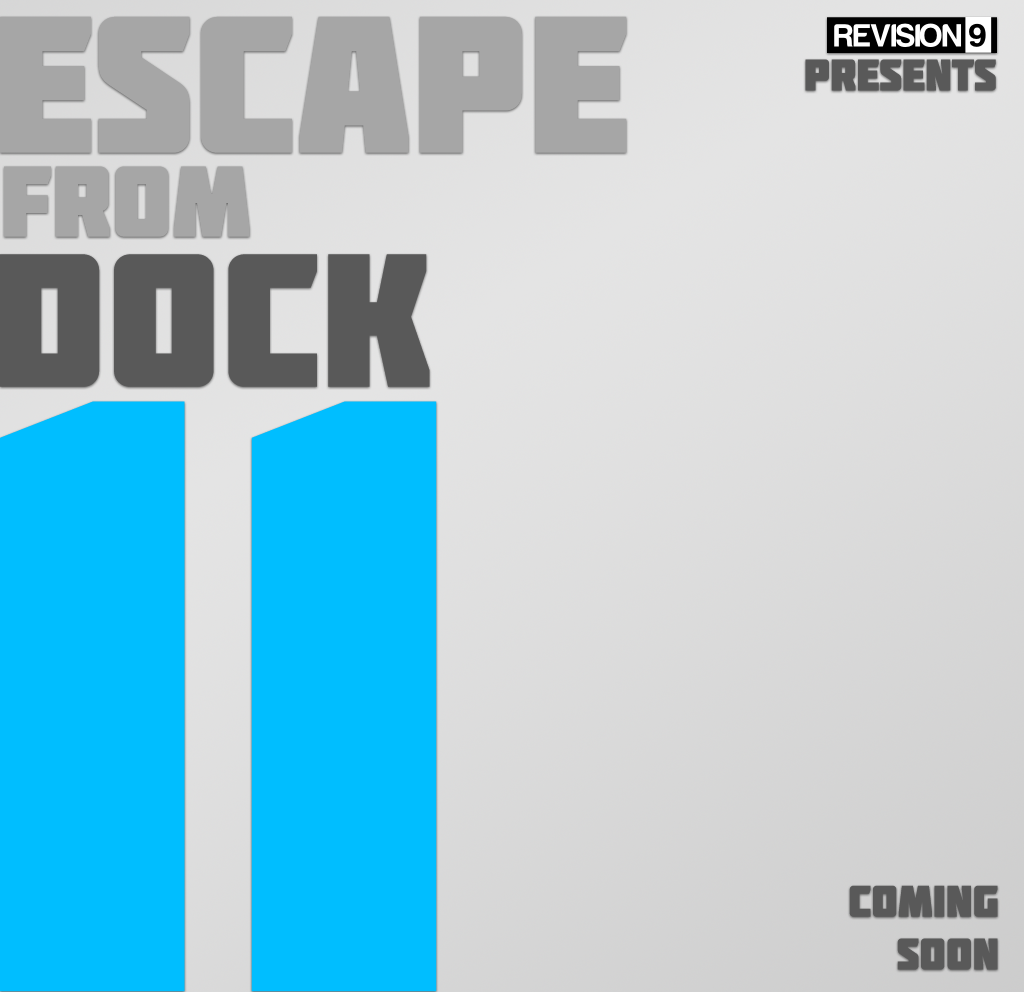
<style>
.page{position:relative;width:1024px;height:992px;background:#00beff}
.page>*{position:absolute;margin:0}
.t1{font:194px "Molot";color:#a6a6a6}
.t2{font:44px "Molot";color:#595959}
.t3{font:100px "Molot";color:#a6a6a6}
.t4{font:189px "Molot";color:#595959}
</style>
<div class="page">
<p class="t1" style="left:0px;top:16px;width:627px;height:137px">escape</p>
<p class="t2" style="left:805px;top:59px;width:191px;height:32px">presents</p>
<p class="t3" style="left:4px;top:166px;width:246px;height:71px">from</p>
<p class="t4" style="left:0px;top:254px;width:430px;height:133px">dock</p>
<p class="t2" style="left:849px;top:885px;width:149px;height:85px;text-align:right">coming<br>soon</p>
</div>
